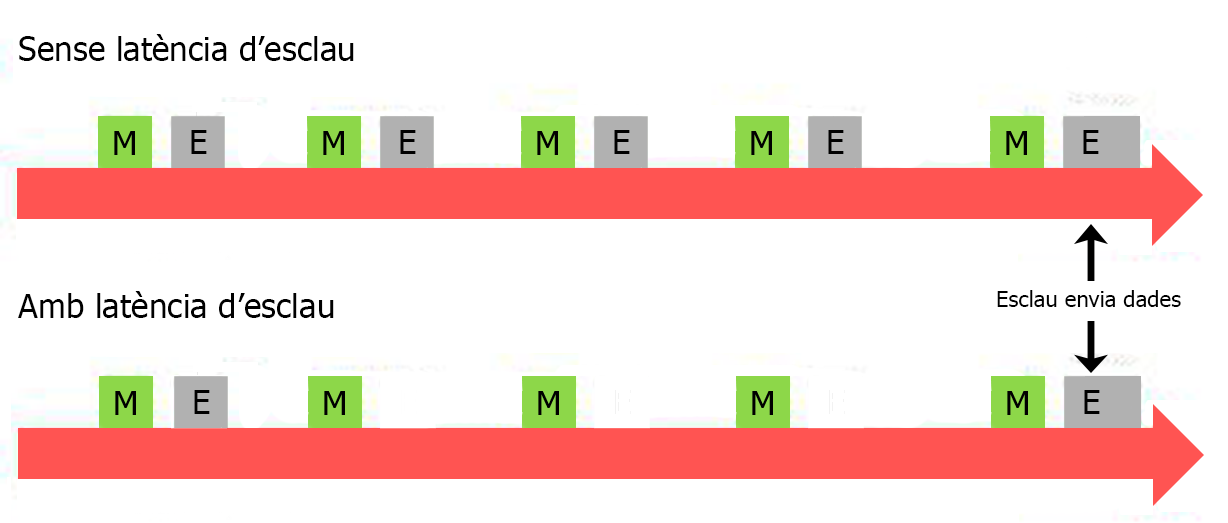
<style>
.page{position:relative;width:1228px;height:523px;background:#ffffff}
.page>*{position:absolute;margin:0}
.t1{font:12px "Tahoma";color:#000000}
.t2{font:22.2px "Tahoma";color:#000000}
</style>
<div class="page">
<p class="t1" style="left:19px;top:34px;width:335px;height:27px">Sense latència d’esclau</p>
<p class="t1" style="left:18px;top:291px;width:316px;height:27px">Amb latència d’esclau</p>
<p class="t2" style="left:997px;top:290px;width:184px;height:17px">Esclau envia dades</p>
</div>
